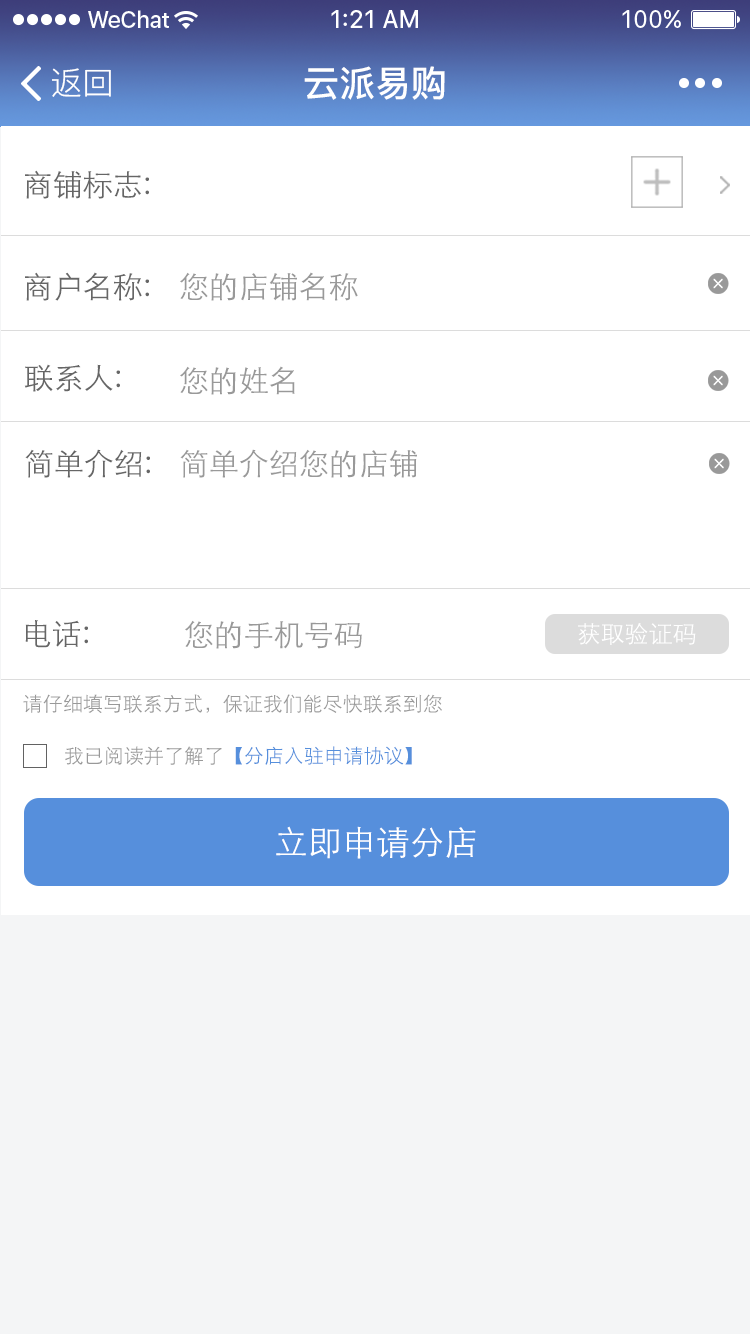
<style>
.page{position:relative;width:750px;height:1334px;background:#ffffff}
.page>*{position:absolute;margin:0}
.t1{font:32px "PingFang-SC-Regular";color:#ffffff}
.t2{font:36px "PingFang-SC-Bold";color:#ffffff}
.t3{font:30px "STXihei";color:#666666}
.t4{font:30px "STXihei";color:#999999}
.t5{font:24px "STXihei";color:#ffffff}
.t6{font:20px "STXihei";color:#999999}
.t7{font:20px "STXihei";color:#568fdc}
.t8{font:34px "STXihei";color:#ffffff}
</style>
<div class="page">
<p class="t1" style="left:52px;top:68px;width:59px;height:29px">返回</p>
<p class="t2" style="left:304px;top:66px;width:141px;height:34px">云派易购</p>
<p class="t3" style="left:25px;top:170px;width:124px;height:29px">商铺标志:</p>
<p class="t3" style="left:25px;top:272px;width:124px;height:29px">商户名称:</p>
<p class="t4" style="left:180px;top:272px;width:178px;height:29px">您的店铺名称</p>
<p class="t3" style="left:24px;top:364px;width:96px;height:28px">联系人:</p>
<p class="t4" style="left:180px;top:366px;width:115px;height:29px">您的姓名</p>
<p class="t3" style="left:25px;top:449px;width:125px;height:29px">简单介绍:</p>
<p class="t4" style="left:180px;top:449px;width:237px;height:29px">简单介绍您的店铺</p>
<p class="t3" style="left:25px;top:620px;width:63px;height:28px">电话:</p>
<p class="t4" style="left:185px;top:620px;width:177px;height:29px">您的手机号码</p>
<p class="t5" style="left:578px;top:623px;width:118px;height:22px">获取验证码</p>
<p class="t6" style="left:23px;top:694px;width:419px;height:19px">请仔细填写联系方式，保证我们能尽快联系到您</p>
<p class="t7" style="left:65px;top:746px;width:347px;height:19px"><span class="t6">我已阅读并了解了</span>【分店入驻申请协议】</p>
<p class="t8" style="left:276px;top:826px;width:200px;height:33px">立即申请分店</p>
</div>
